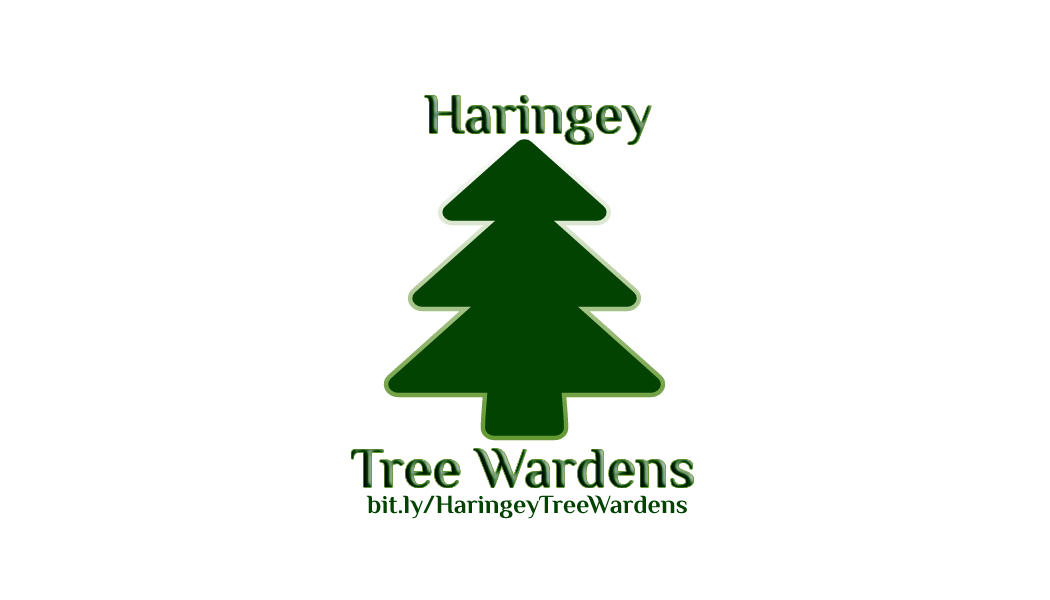
<style>
.page{position:relative;width:1050px;height:600px;background:#ffffff}
.page>*{position:absolute;margin:0}
.t1{font:57px "Philosopher-Bold"}
.t2{font:26px "Philosopher-Bold";color:#024302}
</style>
<div class="page">
<p class="t1" style="left:424px;top:95px;width:227px;height:50px">Haringey</p>
<p class="t1" style="left:351px;top:448px;width:343px;height:40px">Tree Wardens</p>
<p class="t2" style="left:366px;top:495px;width:321px;height:24px">bit.ly/HaringeyTreeWardens</p>
</div>
